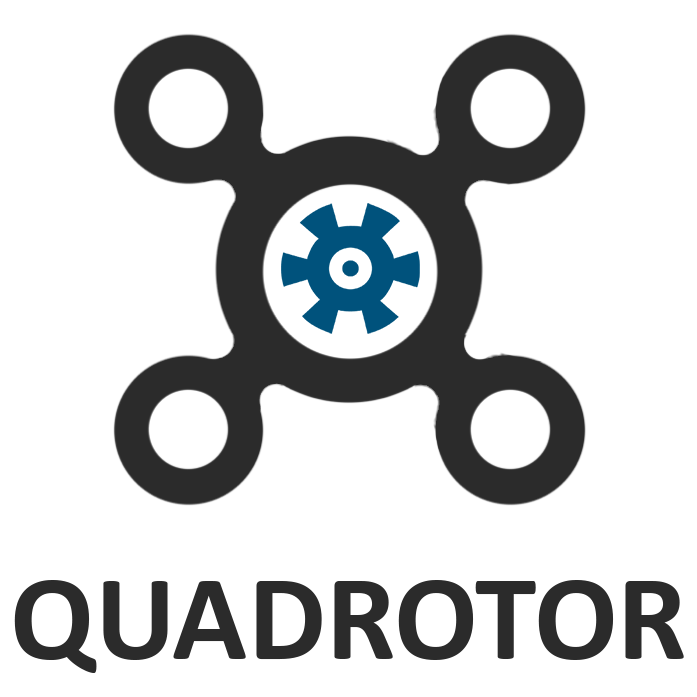
<style>
.page{position:relative;width:697px;height:697px;background:#ffffff}
.page>*{position:absolute;margin:0}
.t1{font:124px "Calibri-Bold";color:#2b2b2b}
</style>
<div class="page">
<p class="t1" style="left:14px;top:580px;width:670px;height:93px">QUADROTOR</p>
</div>
